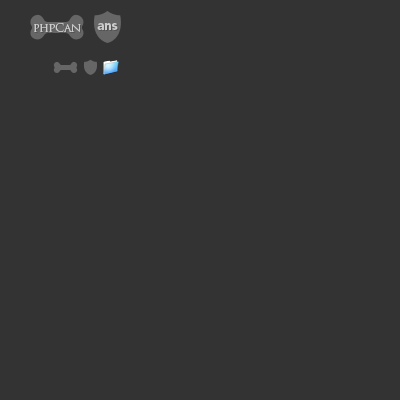
<style>
.page{position:relative;width:400px;height:400px;background:#333333}
.page>*{position:absolute;margin:0}
.t1{font:12px "TrajanPro-Regular";letter-spacing:-0.05em;color:#cccccc}
</style>
<div class="page">
<p class="t1" style="left:34px;top:23px;width:47px;height:9px">phpCan</p>
</div>
